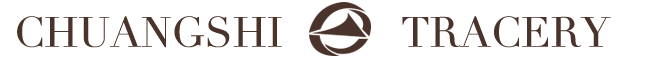
<style>
.page{position:relative;width:650px;height:60px;background:#ffffff}
.page>*{position:absolute;margin:0}
.t1{font:41.5px "Didot";color:#4a332a}
</style>
<div class="page">
<p class="t1" style="left:17px;top:16px;width:265px;height:32px">CHUANGSHI</p>
<p class="t1" style="left:402px;top:16px;width:209px;height:32px">TRACERY</p>
</div>
